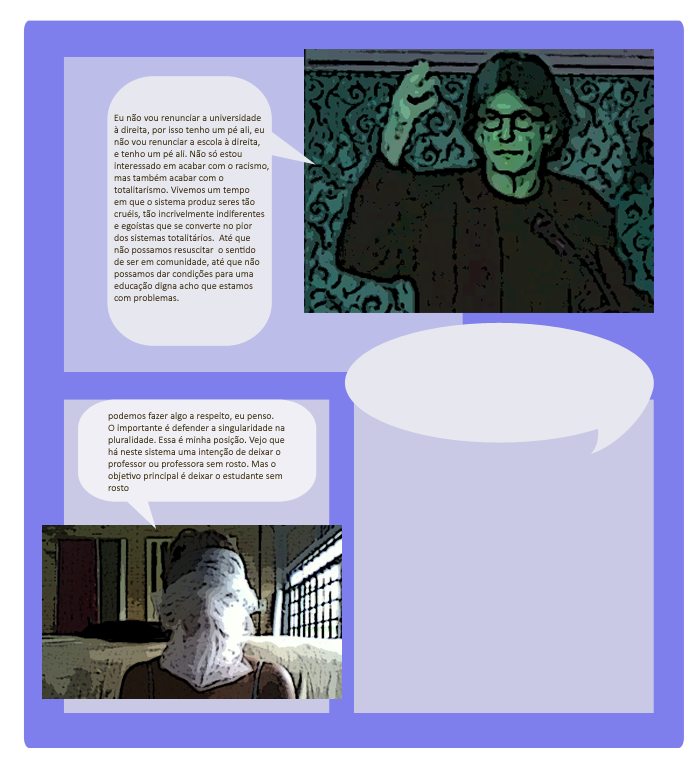
<style>
.page{position:relative;width:700px;height:768px}
.page>*{position:absolute;margin:0}
.t1{font:10px "Calibri";color:#332605}
</style>
<div class="page">
<p class="t1" style="left:114px;top:114px;width:155px;height:189px">Eu não vou renunciar a universidade <br>à direita, por isso tenho um pé ali, eu <br>não vou renunciar a escola à direita, <br>e tenho um pé ali. Não só estou <br>interessado em acabar com o racismo, <br>mas também acabar com o <br>totalitarismo. Vivemos um tempo <br>em que o sistema produz seres tão <br>cruéis, tão incrivelmente indiferentes <br>e egoístas que se converte no pior <br>dos sistemas totalitários.  Até que <br>não possamos resuscitar  o sentido <br>de ser em comunidade, até que não <br>possamos dar condições para uma <br>educação digna acho que estamos <br>com problemas.</p>
<p class="t1" style="left:108px;top:412px;width:177px;height:79px">podemos fazer algo a respeito, eu penso. <br>O importante é defender a singularidade na <br>pluralidade. Essa é minha posição. Vejo que <br>há neste sistema uma intenção de deixar o <br>professor ou professora sem rosto. Mas o <br>objetivo principal é deixar o estudante sem<br>rosto</p>
</div>
